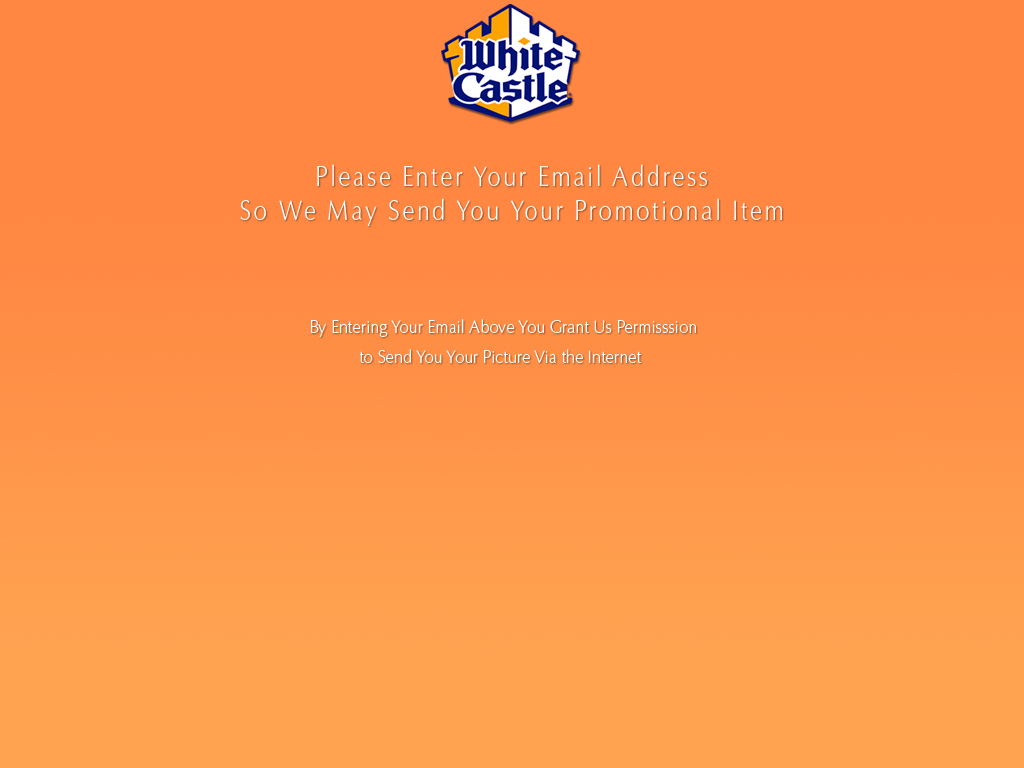
<style>
.page{position:relative;width:1024px;height:768px;background:#ff8742}
.page>*{position:absolute;margin:0}
.t1{font:28px "OptimaEL-Text";letter-spacing:0.1em;color:#ffffff;scale:0.85 1}
.t2{font:18px "OptimaEL-Text";color:#ffffff;scale:0.91 1}
</style>
<div class="page">
<p class="t1" style="left:240px;top:164px;width:542px;height:63px;text-align:center">Please Enter Your Email Address<br>So We May Send You Your Promotional Item</p>
<p class="t2" style="left:311px;top:319px;width:385px;height:44px;text-align:center">By Entering Your Email Above You Grant Us Permisssion<br>to Send You Your Picture Via the Internet</p>
</div>
